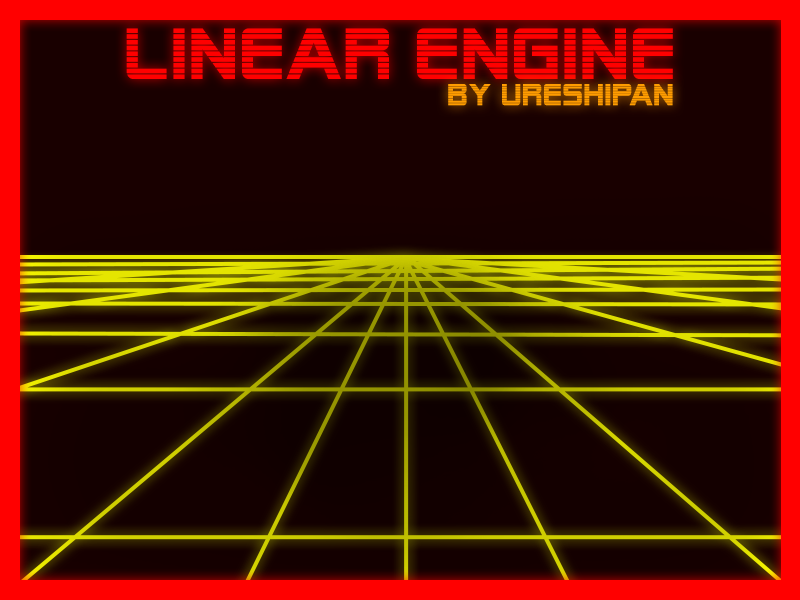
<style>
.page{position:relative;width:800px;height:600px}
.page>*{position:absolute;margin:0}
.t1{font:72px "AlienEncounters";letter-spacing:0.04em;color:#ff0000}
.t2{font:30px "AlienEncounters";letter-spacing:0.04em;color:#ff9c00}
</style>
<div class="page">
<p class="t1" style="left:126px;top:28px;width:547px;height:51px">LINEAR ENGINE</p>
<p class="t2" style="left:448px;top:84px;width:225px;height:22px">by ureshipan</p>
</div>
